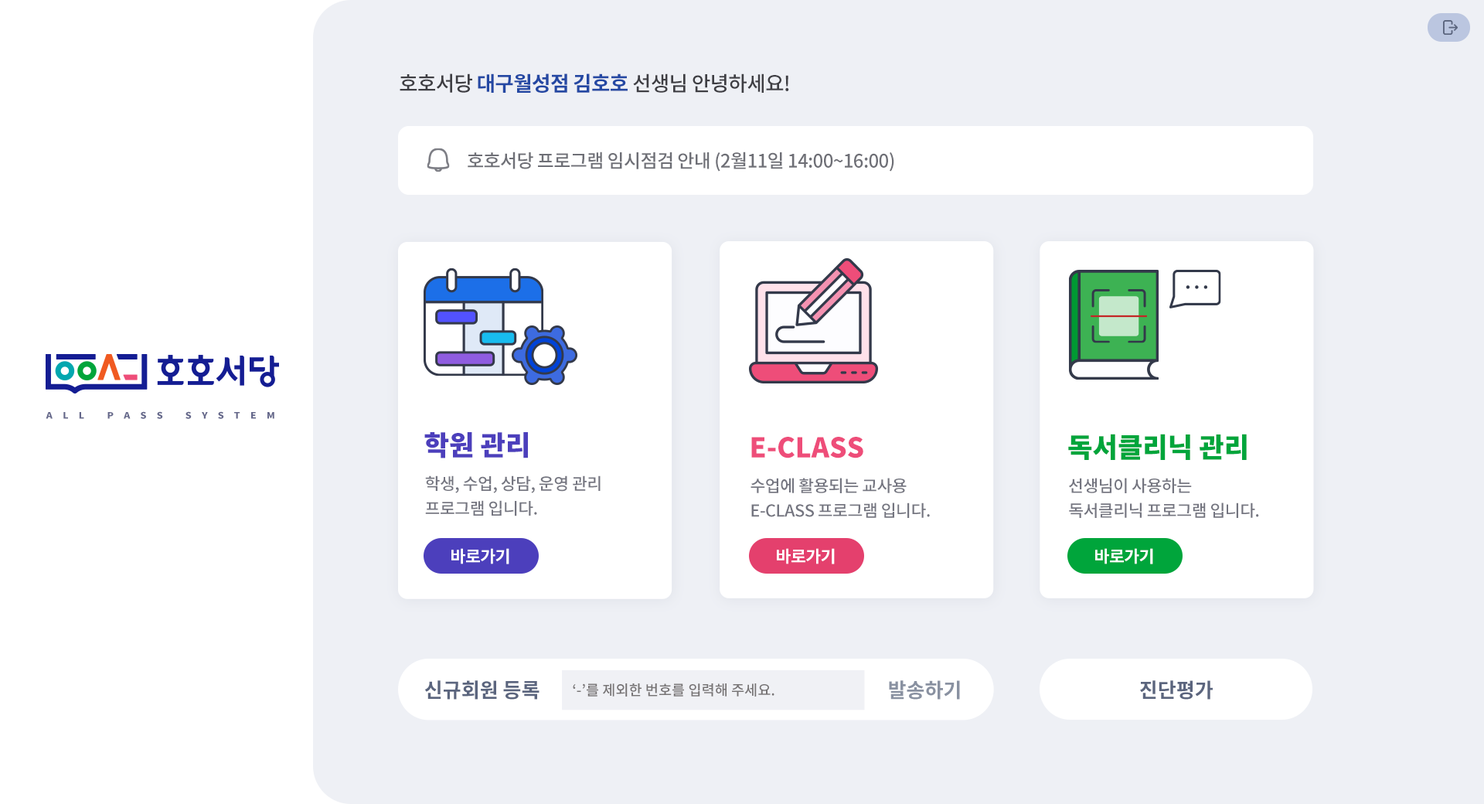
<style>
.page{position:relative;width:1484px;height:804px;background:#ffffff}
.page>*{position:absolute;margin:0}
.t1{font:20.6px "NotoSansCJKkr-Medium";letter-spacing:-0.025em;color:#3e3e43;text-transform:uppercase}
.t2{font:20.6px "NotoSansCJKkr-Bold";letter-spacing:-0.025em;color:#2448a3;text-transform:uppercase}
.t3{font:18.5px "NotoSansCJKkr-Medium";letter-spacing:-0.025em;color:#6e6f76}
.t4{font:8.9px "NotoSansCJKkr-Black";letter-spacing:1.06em;color:#65688b;text-transform:uppercase;scale:1.08 1}
.t5{font:27.3px "NotoSansCJKkr-Black";color:#4c3fbc}
.t6{font:27.3px "NotoSansCJKkr-Black";color:#ee4d79}
.t7{font:27.3px "NotoSansCJKkr-Black";color:#00a53b}
.t8{font:16.5px/24.8px "NotoSansCJKkr-Medium";letter-spacing:-0.025em;color:#747580}
.t9{font:16.5px "NotoSansCJKkr-Bold";letter-spacing:-0.025em;color:#ffffff}
.t10{font:20.2px "NotoSansCJKkr-Bold";color:#5b657e}
.t11{font:14.4px "NotoSansCJKkr-Medium";color:#767374}
.t12{font:20.2px "NotoSansCJKkr-Bold";color:#8a91a1}
</style>
<div class="page">
<p class="t1" style="left:400px;top:73px;width:389px;height:20px">호호서당 <span class="t2">대구월성점 김호호</span> 선생님 안녕하세요!</p>
<p class="t3" style="left:468px;top:151px;width:426px;height:21px">호호서당 프로그램 임시점검 안내 (2월11일 14:00~16:00)</p>
<p class="t4" style="left:46px;top:411px;width:228px;height:8px">All Pass system</p>
<p class="t5" style="left:424px;top:432px;width:104px;height:26px">학원 관리</p>
<p class="t6" style="left:751px;top:437px;width:112px;height:21px">E-CLASS</p>
<p class="t7" style="left:1068px;top:434px;width:178px;height:26px">독서클리닉 관리</p>
<p class="t8" style="left:425px;top:475px;width:175px;height:41px">학생, 수업, 상담, 운영 관리<br>프로그램 입니다.</p>
<p class="t8" style="left:750px;top:478px;width:180px;height:40px">수업에 활용되는 교사용<br>E-CLASS 프로그램 입니다.</p>
<p class="t8" style="left:1069px;top:478px;width:190px;height:40px">선생님이 사용하는<br>독서클리닉 프로그램 입니다.</p>
<p class="t9" style="left:451px;top:548px;width:58px;height:16px">바로가기</p>
<p class="t9" style="left:777px;top:548px;width:58px;height:16px">바로가기</p>
<p class="t9" style="left:1095px;top:548px;width:58px;height:16px">바로가기</p>
<p class="t10" style="left:424px;top:680px;width:115px;height:19px">신규회원 등록</p>
<p class="t11" style="left:573px;top:683px;width:201px;height:13px">‘-’를 제외한 번호를 입력해 주세요.</p>
<p class="t12" style="left:889px;top:680px;width:71px;height:19px">발송하기</p>
<p class="t10" style="left:1140px;top:680px;width:72px;height:19px">진단평가</p>
</div>
